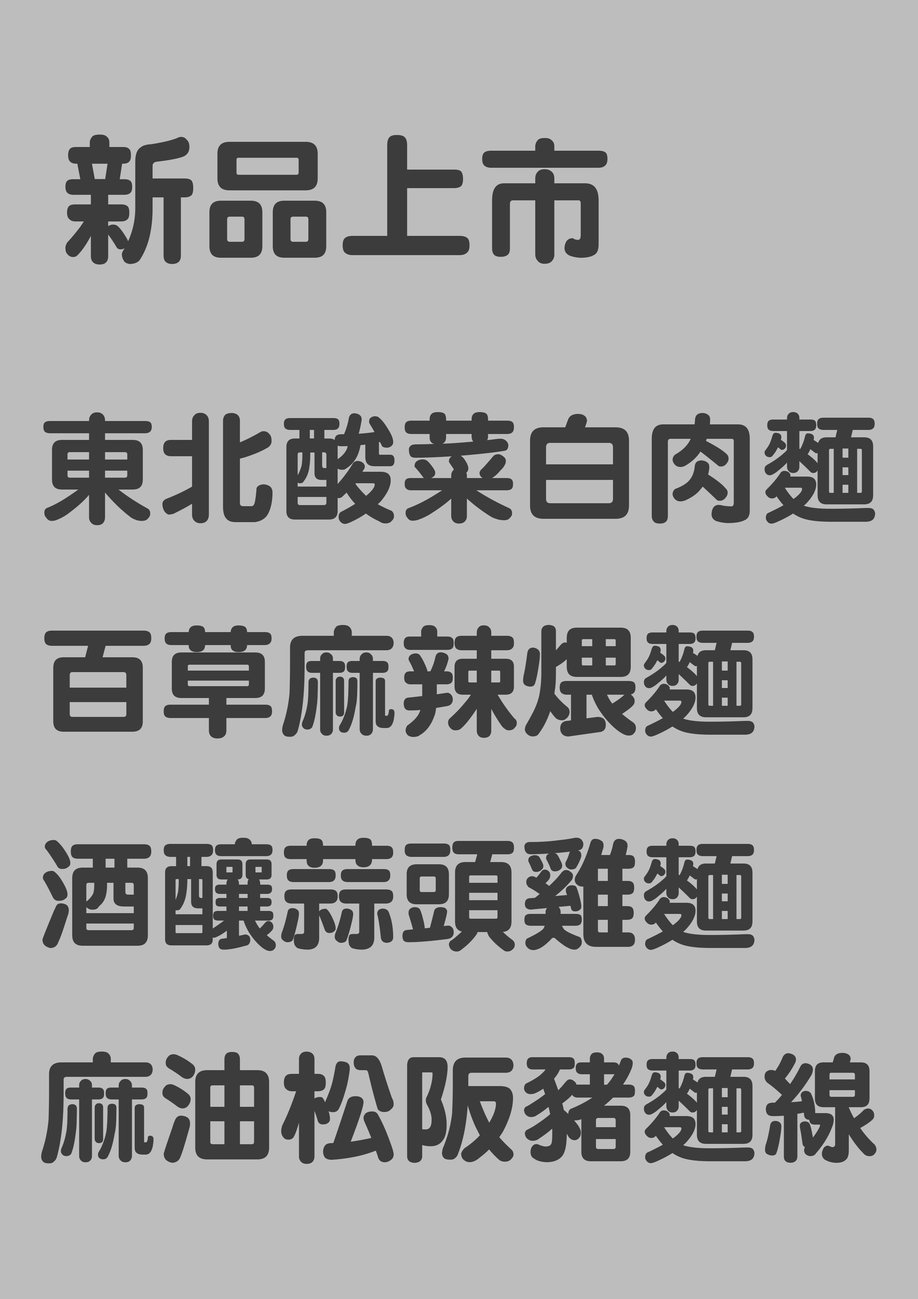
<style>
.page{position:relative;width:918px;height:1299px;background:#bdbdbd}
.page>*{position:absolute;margin:0}
.t1{font:140px "DFNYuan-W9-WIN-BF";color:#3c3c3c}
.t2{font:121.7px/213.1px "DFNYuan-W9-WIN-BF";color:#3c3c3c}
</style>
<div class="page">
<p class="t1" style="left:65px;top:134px;width:543px;height:131px">新品上市</p>
<p class="t2" style="left:41px;top:412px;width:836px;height:752px">東北酸菜白肉麵<br>百草麻辣煨麵<br>酒釀蒜頭雞麵<br>麻油松阪豬麵線</p>
</div>
